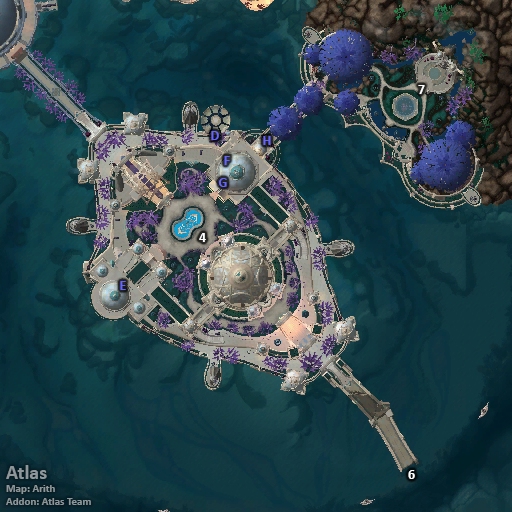
<style>
.page{position:relative;width:512px;height:512px}
.page>*{position:absolute;margin:0}
.t1{font:14px "Calibri-Bold";color:#ffffff}
.t2{font:14px "Calibri-Bold";color:#6666ff}
.t3{font:11px "Calibri-Bold";color:#8f969a}
.t4{font:20px "Calibri-Bold";color:#8f969a}
</style>
<div class="page">
<p class="t1" style="left:418px;top:85px;width:7px;height:9px">7</p>
<p class="t2" style="left:211px;top:131px;width:8px;height:9px">D</p>
<p class="t2" style="left:263px;top:136px;width:8px;height:9px">H</p>
<p class="t2" style="left:224px;top:156px;width:6px;height:9px">F</p>
<p class="t2" style="left:218px;top:178px;width:9px;height:9px">G</p>
<p class="t1" style="left:199px;top:233px;width:7px;height:9px">4</p>
<p class="t2" style="left:120px;top:281px;width:6px;height:9px">E</p>
<p class="t3" style="left:6px;top:465px;width:85px;height:40px"><span class="t4">Atlas<br></span>Map: Arith<br>Addon: Atlas Team</p>
<p class="t1" style="left:408px;top:470px;width:7px;height:9px">6</p>
</div>
